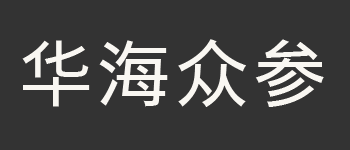
<style>
.page{position:relative;width:350px;height:150px;background:#333333}
.page>*{position:absolute;margin:0}
.t1{font:72px "Tensentype-JiaLiZhongHeiJ";letter-spacing:0.085em;color:#f9f7f2}
</style>
<div class="page">
<p class="t1" style="left:22px;top:39px;width:302px;height:68px">华海众参</p>
</div>
